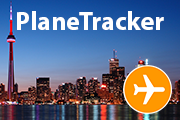
<style>
.page{position:relative;width:180px;height:120px}
.page>*{position:absolute;margin:0}
.t1{font:26px "MyriadPro-Bold";color:#ffffff}
</style>
<div class="page">
<p class="t1" style="left:17px;top:11px;width:147px;height:19px">PlaneTracker</p>
</div>
